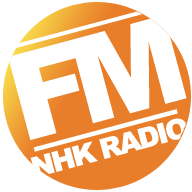
<style>
.page{position:relative;width:192px;height:192px;background:#ffffff}
.page>*{position:absolute;margin:0}
.t1{font:120px "Arial-Black";letter-spacing:-0.1em;color:#ffffff}
.t2{font:28px "Arial-Black";letter-spacing:-0.075em;color:#ffffff}
</style>
<div class="page">
<p class="t1" style="left:8px;top:15px;width:179px;height:125px;rotate:-15deg">FM</p>
<p class="t2" style="left:30px;top:118px;width:158px;height:60px;rotate:-15deg">NHK RADIO</p>
</div>
